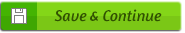
<style>
.page{position:relative;width:185px;height:33px;background:#7bc716}
.page>*{position:absolute;margin:0}
.t1{font:16px "Amaranth-Italic";color:#305102}
</style>
<div class="page">
<p class="t1" style="left:54px;top:9px;width:108px;height:13px">Save &amp; Continue</p>
</div>
